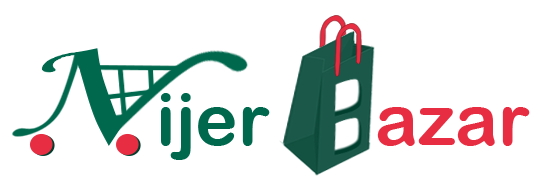
<style>
.page{position:relative;width:548px;height:188px;background:#ffffff}
.page>*{position:absolute;margin:0}
.t1{font:72px "ArialRoundedMTBold";color:#00684d}
.t2{font:72px "ArialRoundedMTBold";color:#e72d41}
</style>
<div class="page">
<p class="t1" style="left:161px;top:93px;width:109px;height:67px">ijer</p>
<p class="t2" style="left:377px;top:107px;width:153px;height:39px">azar</p>
</div>
